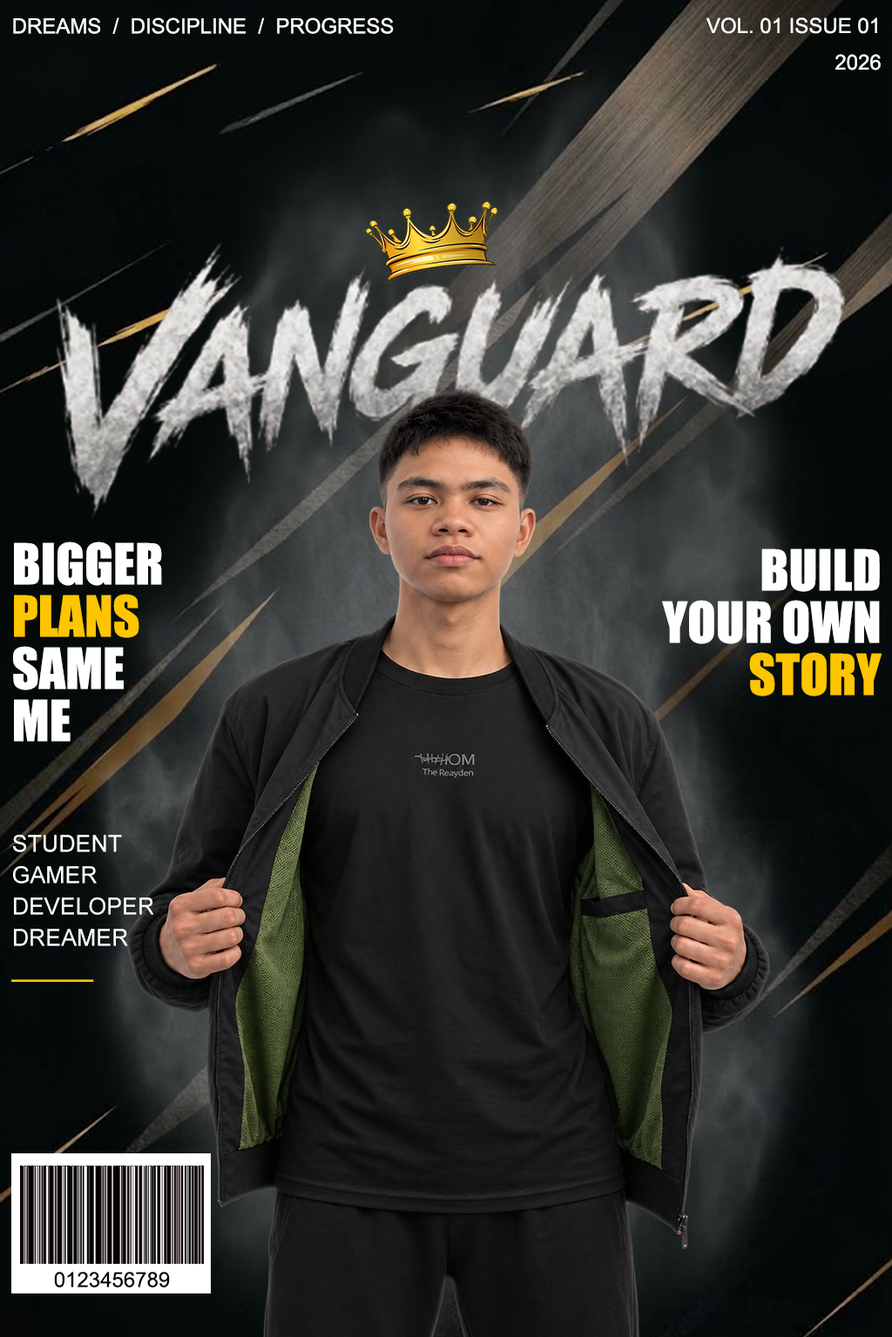
<style>
.page{position:relative;width:892px;height:1337px}
.page>*{position:absolute;margin:0}
.t1{font:20.9px "ArialMT";color:#ffffff}
.t2{font:52.2px/52.2px "Impact";color:#ffffff}
.t3{font:52.2px/52.2px "Impact";color:#fec501}
.t4{font:23.3px/31.3px "ArialMT";color:#ffffff}
.t5{font:23.3px/31.3px "ArialMT";color:#fec501;font-weight:bold}
.t6{font:20.9px "ArialMT";color:#000000}
</style>
<div class="page">
<p class="t1" style="left:13px;top:17px;width:381px;height:17px">DREAMS  /  DISCIPLINE  /  PROGRESS</p>
<p class="t1" style="left:706px;top:17px;width:174px;height:54px;text-align:center">VOL. 01 ISSUE 01<br>         2026</p>
<p class="t2" style="left:13px;top:542px;width:149px;height:200px">BIGGER<br><span class="t3">PLANS<br></span>SAME<br>ME</p>
<p class="t2" style="left:662px;top:549px;width:219px;height:148px;text-align:right">BUILD<br>YOUR OWN<br><span class="t3">STORY</span></p>
<p class="t4" style="left:11px;top:835px;width:143px;height:147px">STUDENT<br>GAMER<br>DEVELOPER<br>DREAMER<br><span class="t5">______</span></p>
<p class="t6" style="left:54px;top:1272px;width:116px;height:16px">0123456789</p>
</div>
